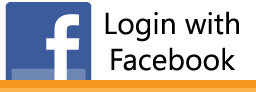
<style>
.page{position:relative;width:256px;height:92px;background:#ffffff}
.page>*{position:absolute;margin:0}
.t1{font:30px "SegoeUI";color:#000000}
</style>
<div class="page">
<p class="t1" style="left:105px;top:11px;width:134px;height:60px;text-align:center">Login with<br>Facebook</p>
</div>
